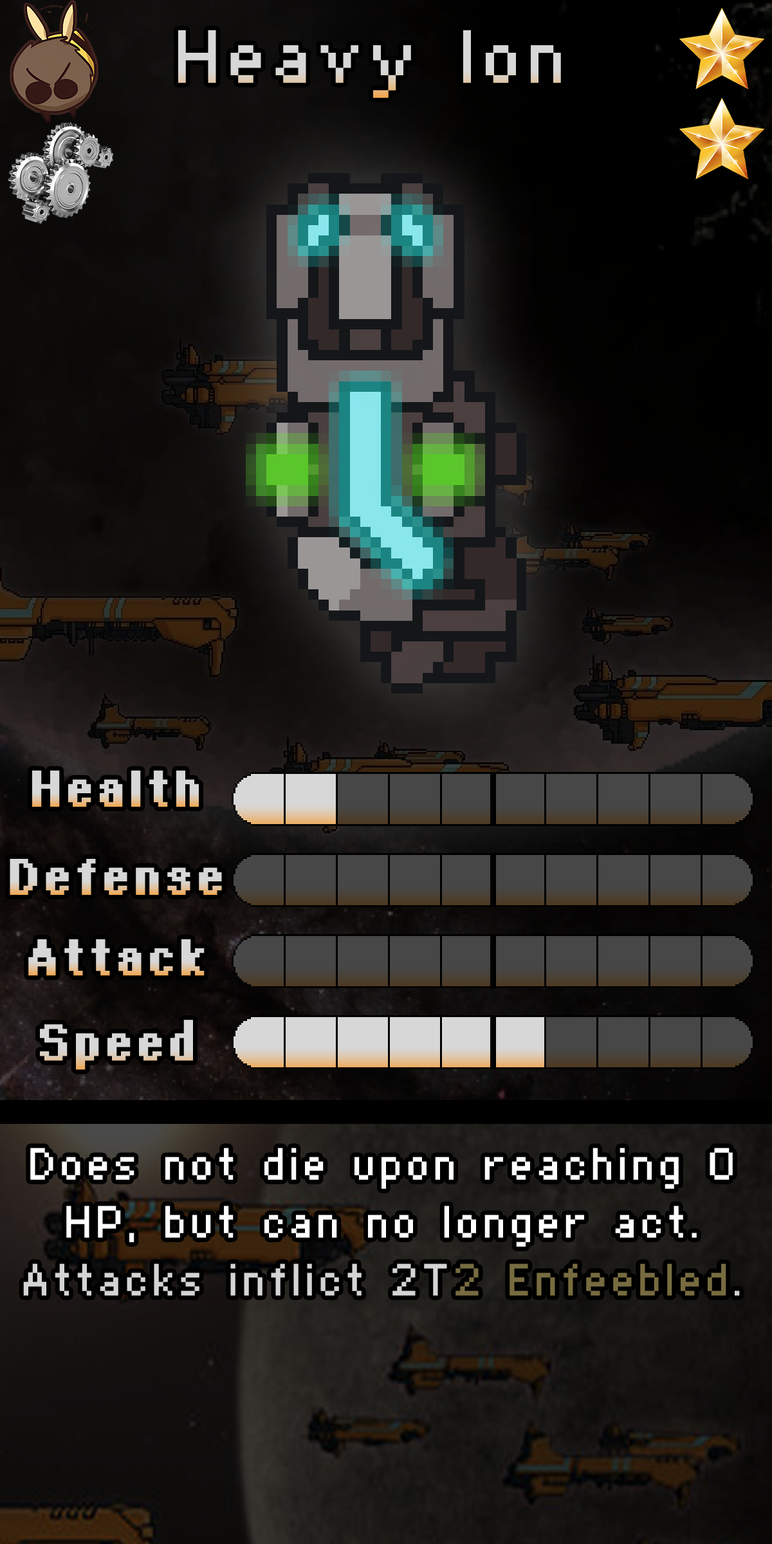
<style>
.page{position:relative;width:772px;height:1544px}
.page>*{position:absolute;margin:0}
.t1{font:128.7px "Supertext01";color:#d7d7d7}
.t2{font:77.2px "Supertext02Bold"}
.t3{font:77.2px "Supertext02Bold";color:#d7d7d7}
.t4{font:77.2px/57.9px "Supertext01";color:#ffffff}
.t5{font:77.2px/57.9px "Supertext01";color:#d4d4d4}
.t6{font:77.2px/57.9px "Supertext01";color:#776c40}
</style>
<div class="page">
<p class="t1" style="left:178px;top:30px;width:383px;height:68px">Heavy Ion</p>
<p class="t2" style="left:32px;top:770px;width:167px;height:37px">Health</p>
<p class="t2" style="left:10px;top:859px;width:212px;height:36px">Defense</p>
<p class="t2" style="left:28px;top:939px;width:177px;height:37px">Attack</p>
<p class="t3" style="left:40px;top:1020px;width:153px;height:50px">Speed</p>
<p class="t4" style="left:23px;top:1148px;width:717px;height:148px;text-align:center">Does not die upon reaching 0 HP, but can no longer act.<br><span class="t5">Attacks inflict 2T</span><span class="t6">2 Enfeebled</span><span class="t5">.</span></p>
</div>
